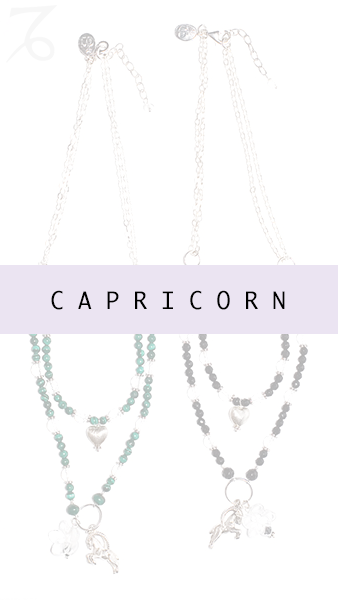
<style>
.page{position:relative;width:338px;height:600px;background:#ffffff}
.page>*{position:absolute;margin:0}
.t1{font:23.3px "Ayuthaya";color:#000000}
</style>
<div class="page">
<p class="t1" style="left:51px;top:290px;width:234px;height:20px">C A P R I C O R N</p>
</div>
